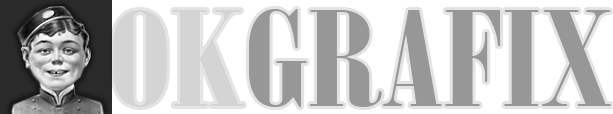
<style>
.page{position:relative;width:613px;height:114px;background:#ffffff}
.page>*{position:absolute;margin:0}
.t1{font:131px "Onyx";color:#979797;scale:1.51 1}
.t2{font:131px "Onyx";color:#d4d4d4;scale:1.51 1}
</style>
<div class="page">
<p class="t1" style="left:113px;top:9px;width:498px;height:98px"><span class="t2">OK</span>GRAFIX</p>
</div>
